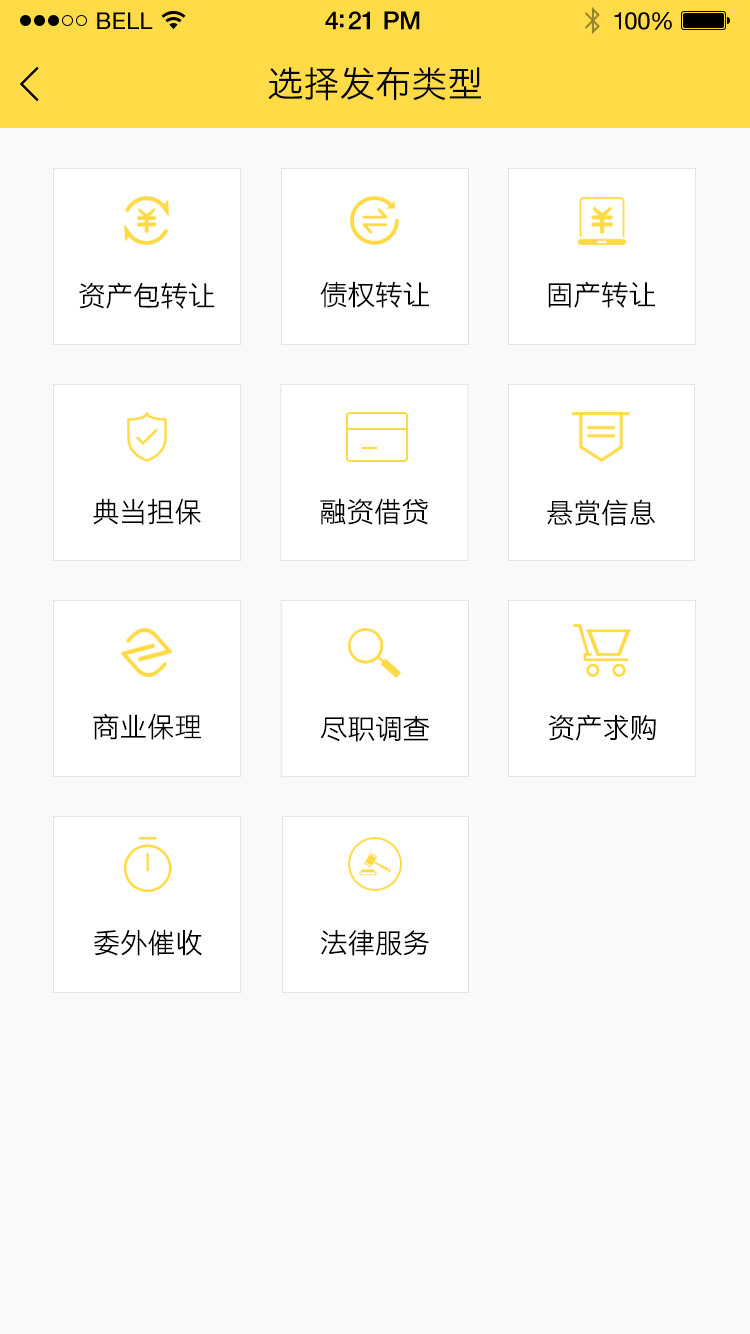
<style>
.page{position:relative;width:750px;height:1334px;background:#f9f9f9}
.page>*{position:absolute;margin:0}
.t1{font:23px "HelveticaNeue";letter-spacing:0.02em;color:#000000}
.t2{font:25px "HelveticaNeue-Medium";letter-spacing:-0.02em;color:#000000}
.t3{font:24px "HelveticaNeue";letter-spacing:-0.02em;color:#010101}
.t4{font:36px "STHeitiSC-Light";color:#000000}
.t5{font:28px "STHeitiSC-Light";letter-spacing:-0.02em;color:#000000}
</style>
<div class="page">
<p class="t1" style="left:97px;top:12px;width:56px;height:17px">BELL</p>
<p class="t1" style="left:97px;top:12px;width:56px;height:17px">BELL</p>
<p class="t2" style="left:325px;top:11px;width:95px;height:19px">4:21 PM</p>
<p class="t2" style="left:325px;top:11px;width:95px;height:19px">4:21 PM</p>
<p class="t3" style="left:614px;top:12px;width:58px;height:18px">100%</p>
<p class="t3" style="left:614px;top:12px;width:58px;height:18px">100%</p>
<p class="t4" style="left:268px;top:67px;width:213px;height:34px">选择发布类型</p>
<p class="t5" style="left:320px;top:281px;width:109px;height:27px">债权转让</p>
<p class="t5" style="left:548px;top:281px;width:107px;height:27px">固产转让</p>
<p class="t5" style="left:79px;top:282px;width:136px;height:27px">资产包转让</p>
<p class="t5" style="left:93px;top:498px;width:108px;height:27px">典当担保</p>
<p class="t5" style="left:320px;top:498px;width:108px;height:27px">融资借贷</p>
<p class="t5" style="left:547px;top:499px;width:109px;height:27px">悬赏信息</p>
<p class="t5" style="left:93px;top:713px;width:108px;height:27px">商业保理</p>
<p class="t5" style="left:320px;top:716px;width:110px;height:26px">尽职调查</p>
<p class="t5" style="left:548px;top:714px;width:108px;height:27px">资产求购</p>
<p class="t5" style="left:94px;top:929px;width:108px;height:27px">委外催收</p>
<p class="t5" style="left:321px;top:930px;width:108px;height:26px">法律服务</p>
</div>
